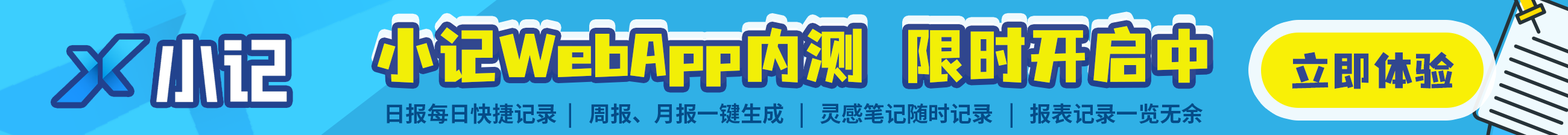
<style>
.page{position:relative;width:1568px;height:135px;background:#30b0e6}
.page>*{position:absolute;margin:0}
.t1{font:62px "YS-HelloFont-BangBangTi"}
.t2{font:62px "YS-HelloFont-BangBangTi";color:#f2ef07}
.t3{font:41.4px "YS-HelloFont-BangBangTi";color:#31478f}
.t4{font:21.7px "SourceHanSansCN-Bold";color:#054c88}
</style>
<div class="page">
<p class="t1" style="left:377px;top:17px;width:830px;height:61px">小记WebApp内测 限时开启中</p>
<p class="t2" style="left:377px;top:26px;width:830px;height:61px">小记WebApp内测 限时开启中</p>
<p class="t3" style="left:1292px;top:52px;width:162px;height:37px">立即体验</p>
<p class="t4" style="left:387px;top:103px;width:816px;height:25px">日报每日快捷记录  |   周报、月报一键生成   |   灵感笔记随时记录   |   报表记录一览无余</p>
</div>
